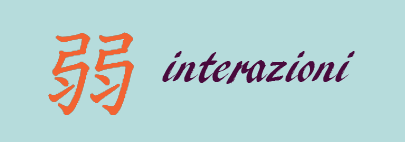
<style>
.page{position:relative;width:405px;height:142px;background:#b6dcdc}
.page>*{position:absolute;margin:0}
.t1{font:44px "ARBLANCA";color:#490a3d}
</style>
<div class="page">
<p class="t1" style="left:162px;top:51px;width:193px;height:33px">interazioni</p>
</div>
